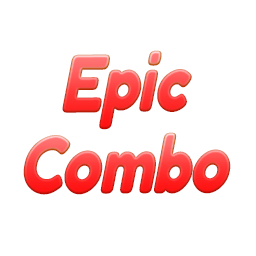
<style>
.page{position:relative;width:256px;height:256px;background:#ffffff}
.page>*{position:absolute;margin:0}
.t1{font:84.3px "Fredoka-Bold";letter-spacing:-0.02em;scale:0.82 1}
</style>
<div class="page">
<p class="t1" style="left:62px;top:50px;width:130px;height:80px">Epic</p>
<p class="t1" style="left:23px;top:132px;width:208px;height:63px">Combo</p>
</div>
